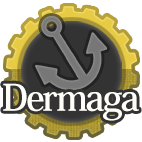
<style>
.page{position:relative;width:142px;height:142px;background:#ffffff}
.page>*{position:absolute;margin:0}
.t1{font:38px "HeiseiMinStd-W7";letter-spacing:-0.04em;color:#fffef9;scale:0.96 1}
</style>
<div class="page">
<p class="t1" style="left:3px;top:83px;width:136px;height:38px">Dermaga</p>
</div>
